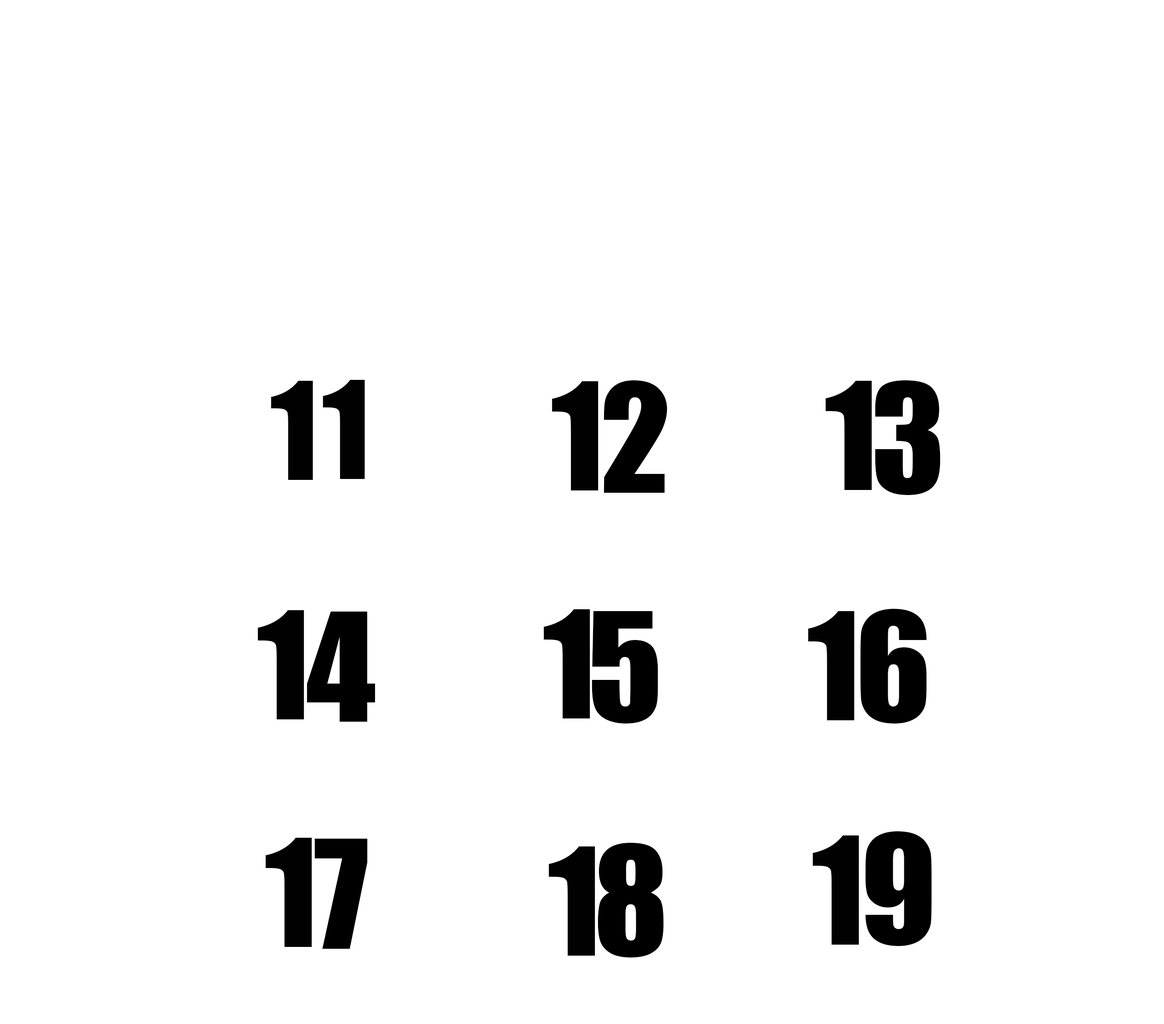
<style>
.page{position:relative;width:1164px;height:1024px;background:#ffffff}
.page>*{position:absolute;margin:0}
.t1{font:125.4px "Impact";color:#010101}
.t2{font:138.1px "Impact";color:#010101}
.t3{font:139.7px "Impact";color:#000000}
</style>
<div class="page">
<p class="t1" style="left:271px;top:381px;width:42px;height:99px">1</p>
<p class="t1" style="left:323px;top:380px;width:42px;height:99px">1</p>
<p class="t2" style="left:552px;top:381px;width:47px;height:110px">1</p>
<p class="t3" style="left:604px;top:380px;width:63px;height:113px">2</p>
<p class="t2" style="left:825px;top:381px;width:47px;height:109px">1</p>
<p class="t3" style="left:875px;top:380px;width:65px;height:115px">3</p>
<p class="t2" style="left:257px;top:610px;width:47px;height:110px">1</p>
<p class="t3" style="left:307px;top:612px;width:68px;height:110px">4</p>
<p class="t2" style="left:543px;top:610px;width:47px;height:109px">1</p>
<p class="t3" style="left:592px;top:611px;width:66px;height:113px">5</p>
<p class="t2" style="left:808px;top:611px;width:47px;height:110px">1</p>
<p class="t3" style="left:860px;top:609px;width:67px;height:115px">6</p>
<p class="t3" style="left:865px;top:832px;width:67px;height:114px">9</p>
<p class="t2" style="left:265px;top:838px;width:47px;height:109px">1</p>
<p class="t3" style="left:314px;top:839px;width:54px;height:110px">7</p>
<p class="t3" style="left:598px;top:843px;width:66px;height:115px">8</p>
<p class="t2" style="left:812px;top:836px;width:47px;height:109px">1</p>
<p class="t2" style="left:548px;top:847px;width:47px;height:109px">1</p>
</div>
